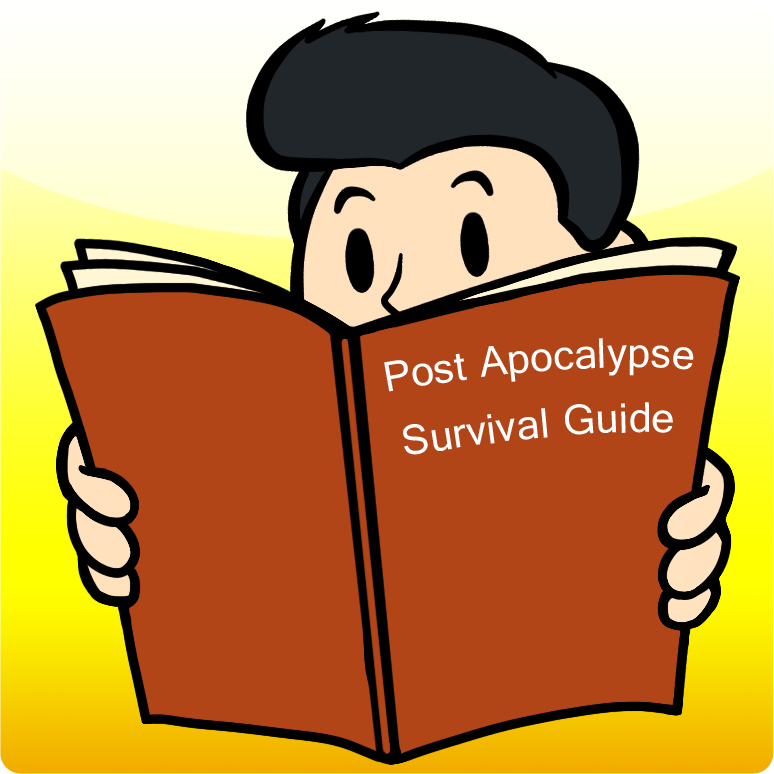
<style>
.page{position:relative;width:774px;height:774px;background:#b14518}
.page>*{position:absolute;margin:0}
.t1{font:45.7px "Raavi";color:#ffffff}
</style>
<div class="page">
<p class="t1" style="left:384px;top:338px;width:310px;height:54px">Post Apocalypse</p>
<p class="t1" style="left:403px;top:402px;width:270px;height:53px">Survival Guide</p>
</div>
